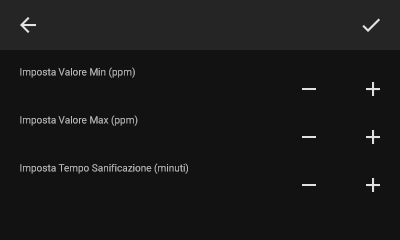
<style>
.page{position:relative;width:400px;height:240px;background:#121212}
.page>*{position:absolute;margin:0}
.t1{font:10px "Roboto-Regular";color:#bababa}
</style>
<div class="page">
<p class="t1" style="left:20px;top:67px;width:115px;height:11px">Imposta Valore Min (ppm)</p>
<p class="t1" style="left:20px;top:115px;width:118px;height:11px">Imposta Valore Max (ppm)</p>
<p class="t1" style="left:20px;top:163px;width:168px;height:11px">Imposta Tempo Sanificazione (minuti)</p>
</div>
